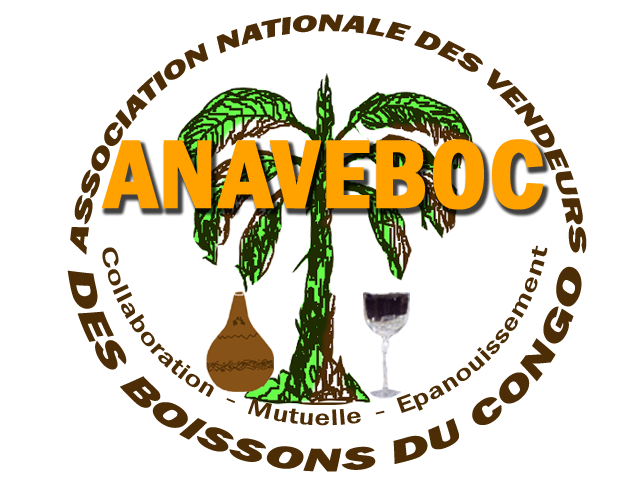
<style>
.page{position:relative;width:640px;height:480px;background:#ffffff}
.page>*{position:absolute;margin:0}
.t1{font:24.4px "FranklinGothic-HeavyItalic";color:#4d2d06}
.t2{font:100px "FranklinGothic-DemiCond";color:#ffa200;font-weight:bold}
.t3{font:22.9px "FranklinGothic-MediumCond";color:#4d2d06}
.t4{font:32.5px "FranklinGothic-HeavyItalic";color:#4d2d06;scale:1.1 1}
</style>
<div class="page">
<p class="t1" style="left:70px;top:14px;width:517px;height:241px;text-align:center">ASSOCIATION NATIONALE DES VENDEURS</p>
<p class="t2" style="left:102px;top:139px;width:441px;height:71px">ANAVEBOC</p>
<p class="t3" style="left:102px;top:245px;width:446px;height:181px;text-align:center">Collaboration  -  Mutuelle  -  Epanouissement</p>
<p class="t4" style="left:67px;top:266px;width:515px;height:206px;text-align:center">DES BOISSONS DU CONGO</p>
</div>
